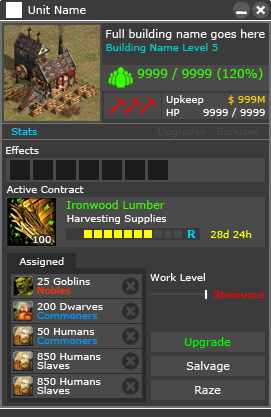
<style>
.page{position:relative;width:271px;height:417px;background:#3b3b3b}
.page>*{position:absolute;margin:0}
.t1{font:11px "Verdana";color:#ffffff}
.t2{font:10px "Verdana";color:#00cccc}
.t3{font:12px "Verdana";color:#33ff00}
.t4{font:10px "Verdana";color:#ffffff}
.t5{font:10px "Verdana";color:#ffcc00}
.t6{font:10px "Verdana";color:#00ccff}
.t7{font:10px "Verdana";color:#4a4a4a}
.t8{font:11px "Verdana";color:#33ff00}
.t9{font:11px "Verdana-Bold";color:#00ccff}
.t10{font:10px "Verdana";color:#ffff00}
.t11{font:10px "Verdana";color:#feffff}
.t12{font:10px "Verdana";color:#ff3300}
.t13{font:10px "Verdana";color:#ff0000}
.t14{font:10px "Verdana";color:#0099ff}
.t15{font:11px "Verdana";color:#00ff00}
</style>
<div class="page">
<p class="t1" style="left:28px;top:5px;width:58px;height:9px">Unit Name</p>
<p class="t1" style="left:106px;top:29px;width:159px;height:11px">Full building name goes here</p>
<p class="t2" style="left:106px;top:43px;width:112px;height:10px">Building Name Level 5</p>
<p class="t3" style="left:137px;top:68px;width:126px;height:12px">9999 / 9999 (120%)</p>
<p class="t4" style="left:166px;top:95px;width:38px;height:10px">Upkeep</p>
<p class="t5" style="left:228px;top:95px;width:37px;height:10px">$ 999M</p>
<p class="t4" style="left:166px;top:109px;width:14px;height:7px">HP</p>
<p class="t4" style="left:203px;top:108px;width:62px;height:9px">9999 / 9999</p>
<p class="t6" style="left:11px;top:128px;width:26px;height:7px">Stats</p>
<p class="t7" style="left:158px;top:127px;width:48px;height:10px">Upgrades</p>
<p class="t7" style="left:217px;top:128px;width:42px;height:7px">Bonuses</p>
<p class="t4" style="left:6px;top:146px;width:33px;height:8px">Effects</p>
<p class="t4" style="left:6px;top:186px;width:78px;height:7px">Active Contract</p>
<p class="t8" style="left:67px;top:200px;width:98px;height:9px">Ironwood Lumber</p>
<p class="t4" style="left:67px;top:214px;width:100px;height:10px">Harvesting Supplies</p>
<p class="t9" style="left:187px;top:230px;width:9px;height:8px">R</p>
<p class="t10" style="left:210px;top:230px;width:42px;height:8px">28d 24h</p>
<p class="t4" style="left:33px;top:236px;width:18px;height:7px">100</p>
<p class="t11" style="left:19px;top:257px;width:45px;height:10px">Assigned</p>
<p class="t4" style="left:37px;top:277px;width:53px;height:8px">25 Goblins</p>
<p class="t4" style="left:150px;top:273px;width:55px;height:8px">Work Level</p>
<p class="t12" style="left:37px;top:286px;width:34px;height:8px">Nobles</p>
<p class="t13" style="left:213px;top:291px;width:52px;height:7px">Strenuous</p>
<p class="t4" style="left:37px;top:303px;width:66px;height:7px">200 Dwarves</p>
<p class="t14" style="left:37px;top:312px;width:61px;height:7px">Commoners</p>
<p class="t4" style="left:37px;top:328px;width:58px;height:7px">50 Humans</p>
<p class="t14" style="left:37px;top:337px;width:61px;height:7px">Commoners</p>
<p class="t15" style="left:185px;top:337px;width:46px;height:11px">Upgrade</p>
<p class="t4" style="left:37px;top:353px;width:64px;height:7px">850 Humans</p>
<p class="t4" style="left:37px;top:361px;width:33px;height:8px">Slaves</p>
<p class="t1" style="left:186px;top:361px;width:44px;height:11px">Salvage</p>
<p class="t4" style="left:37px;top:386px;width:33px;height:8px">Slaves</p>
<p class="t4" style="left:37px;top:378px;width:64px;height:7px">850 Humans</p>
<p class="t1" style="left:195px;top:386px;width:26px;height:8px">Raze</p>
</div>
